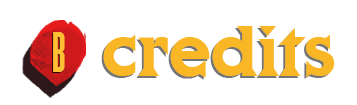
<style>
.page{position:relative;width:357px;height:105px;background:#ffffff}
.page>*{position:absolute;margin:0}
.t1{font:75px "Cortez-Regular";color:#fab725}
.t2{font:50px "Champion-HTF-Bantamweight";color:#ffbf35}
</style>
<div class="page">
<p class="t1" style="left:103px;top:26px;width:232px;height:52px">credits</p>
<p class="t2" style="left:53px;top:32px;width:12px;height:40px">B</p>
</div>
